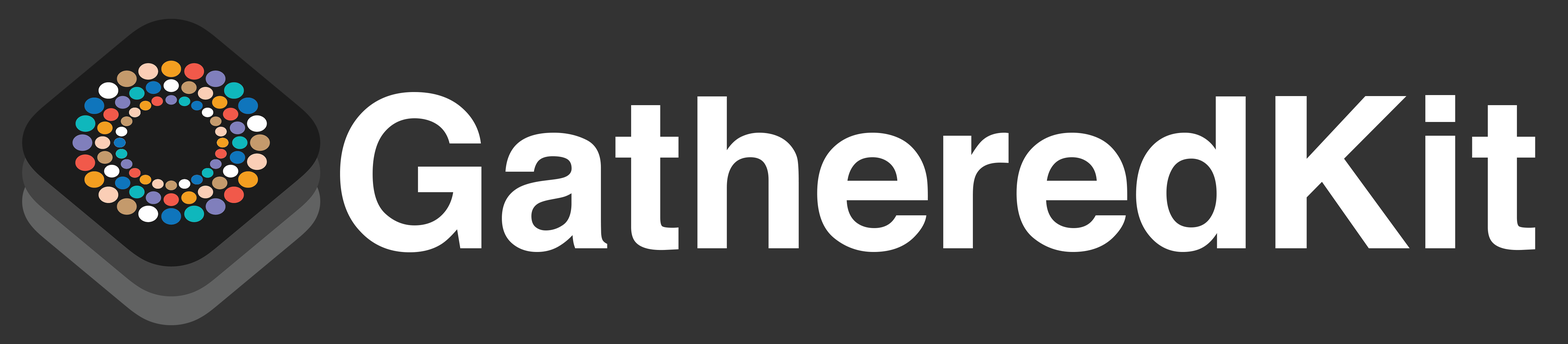
<style>
.page{position:relative;width:1568px;height:344px;background:#333333}
.page>*{position:absolute;margin:0}
.t1{font:211.2px "Helvetica-Bold";color:#ffffff}
</style>
<div class="page">
<p class="t1" style="left:340px;top:92px;width:1195px;height:160px">GatheredKit</p>
</div>
